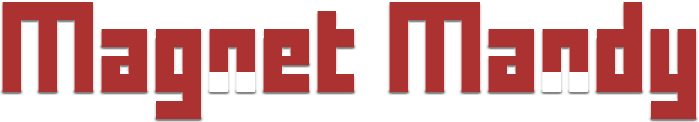
<style>
.page{position:relative;width:699px;height:122px;background:#ffffff}
.page>*{position:absolute;margin:0}
.t1{font:72px "FFFForward";color:#ac3232}
</style>
<div class="page">
<p class="t1" style="left:2px;top:2px;width:694px;height:117px">Magnet Mandy</p>
</div>
